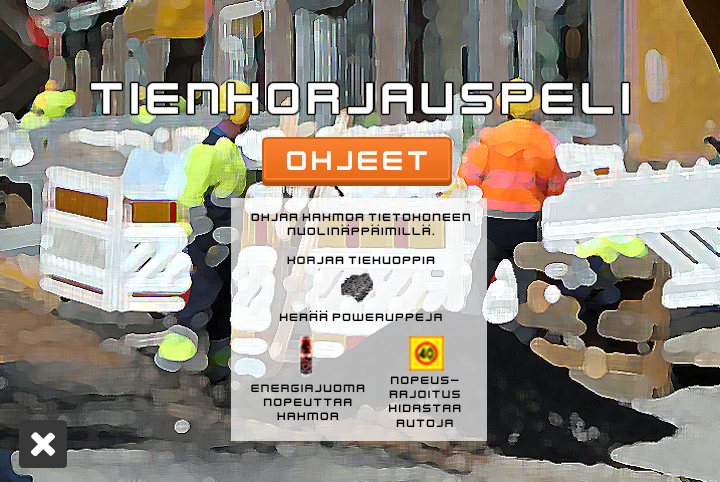
<style>
.page{position:relative;width:720px;height:482px}
.page>*{position:absolute;margin:0}
.t1{font:12px "KenVector-Future";color:#000000}
</style>
<div class="page">
<p class="t1" style="left:251px;top:213px;width:220px;height:109px;text-align:center">Ohjaa Hahmoa tietokoneen <br>nuolinäppäimillä. <br><br>Korjaa Tiekuoppia<br><br><br><br>Kerää POweruppeja</p>
<p class="t1" style="left:388px;top:376px;width:73px;height:52px;text-align:center">Nopeus-<br>RAJOITUS<br>hidastaa<br>autoja</p>
<p class="t1" style="left:251px;top:384px;width:114px;height:37px;text-align:center">Energiajuoma<br>nopeuttaa<br>hahmoa</p>
</div>
